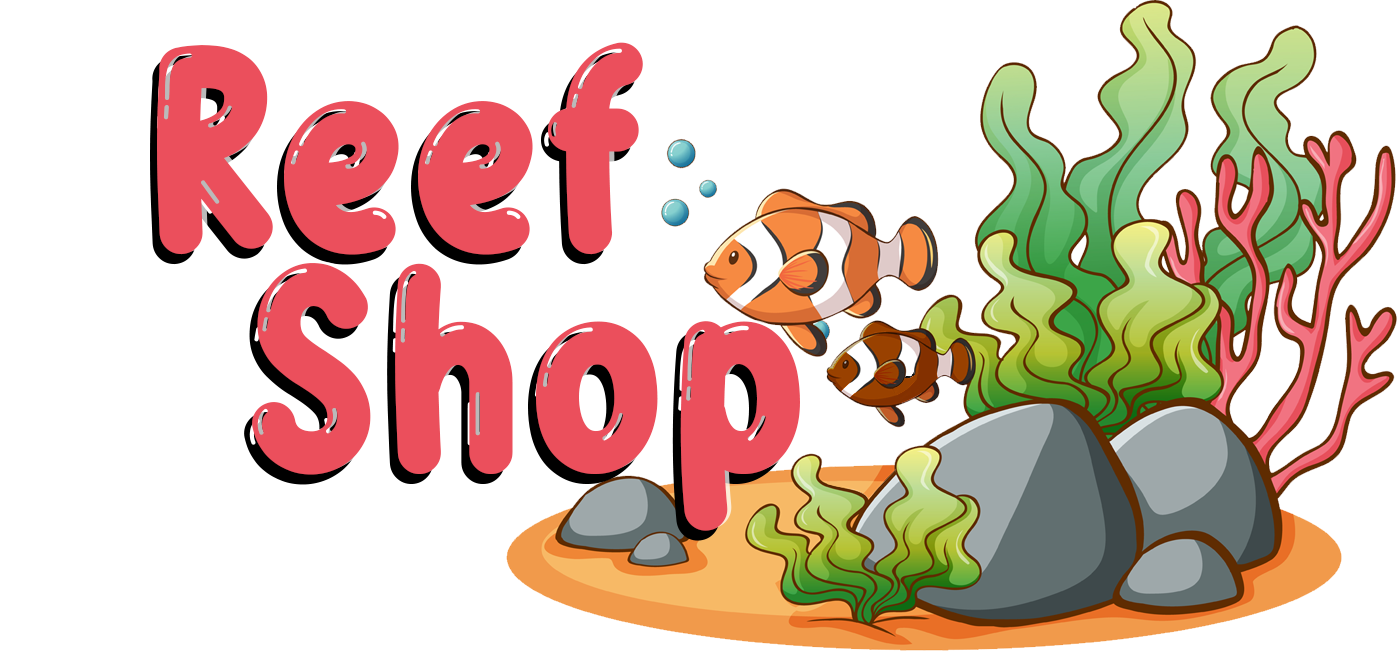
<style>
.page{position:relative;width:1397px;height:651px;background:#ffffff}
.page>*{position:absolute;margin:0}
.t1{font:300px "BubbleBobble";color:#eb4f5c}
</style>
<div class="page">
<p class="t1" style="left:157px;top:42px;width:486px;height:213px">Reef</p>
<p class="t1" style="left:252px;top:263px;width:548px;height:268px">Shop</p>
</div>
